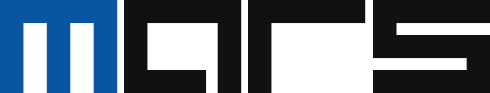
<style>
.page{position:relative;width:490px;height:93px;background:#111111}
.page>*{position:absolute;margin:0}
.t1{font:164px "Mecha";letter-spacing:-0.1em;color:#111111}
.t2{font:164px "Mecha";letter-spacing:-0.1em;color:#0955a2}
</style>
<div class="page">
<p class="t1" style="left:0px;top:0px;width:491px;height:93px"><span class="t2">M</span>ArS</p>
</div>
